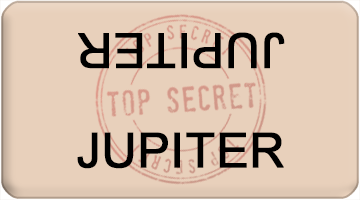
<style>
.page{position:relative;width:360px;height:200px;background:#e8d0bb}
.page>*{position:absolute;margin:0}
.t1{font:48px "ArialMT";color:#000000;font-weight:bold}
</style>
<div class="page">
<p class="t1" style="left:78px;top:32px;width:207px;height:37px;rotate:180deg">JUPITER</p>
<p class="t1" style="left:77px;top:132px;width:207px;height:37px">JUPITER</p>
</div>
